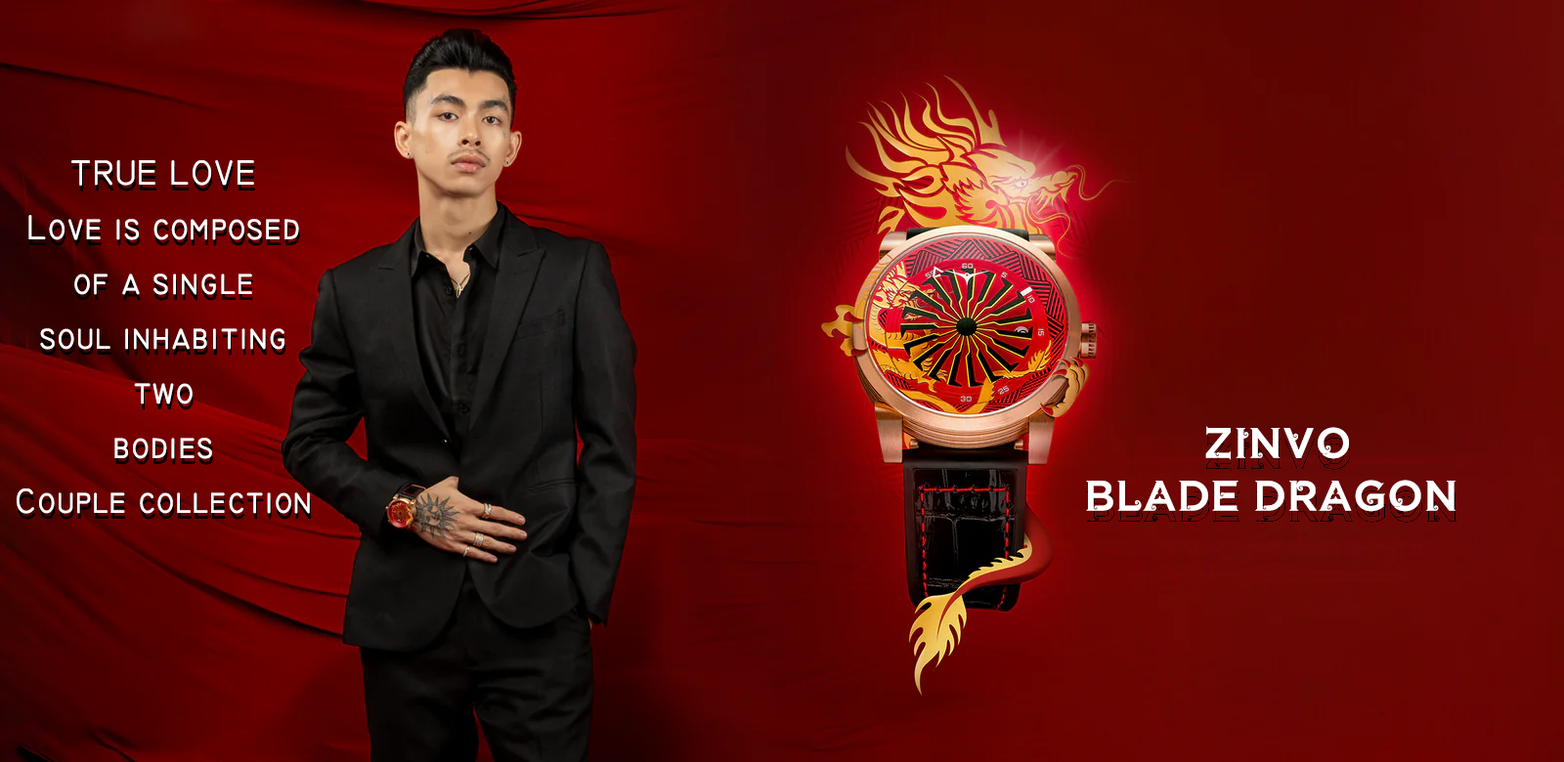
<style>
.page{position:relative;width:1564px;height:762px}
.page>*{position:absolute;margin:0}
.t1{font:35.2px/54.7px "KhmerCNEkPhnom";color:#ffffff;font-weight:bold}
.t2{font:42px/26.4px "ASvadekWave";color:#ffffff;font-weight:bold}
</style>
<div class="page">
<p class="t1" style="left:17px;top:160px;width:293px;height:354px;text-align:center">TRUE LOVE<br>Love is composed <br>of a single<br>soul inhabiting <br>two <br>bodies<br>Couple collection</p>
<p class="t2" style="left:1086px;top:426px;width:369px;height:86px;text-align:center">ZINVO <br>     <br>BLADE DRAGON</p>
</div>
